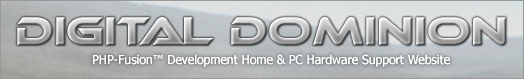
<style>
.page{position:relative;width:524px;height:79px}
.page>*{position:absolute;margin:0}
.t1{font:12.2px "Tahoma";color:#ffffff}
</style>
<div class="page">
<p class="t1" style="left:93px;top:54px;width:357px;height:13px">PHP-Fusion™ Development Home &amp; PC Hardware Support Website</p>
</div>
